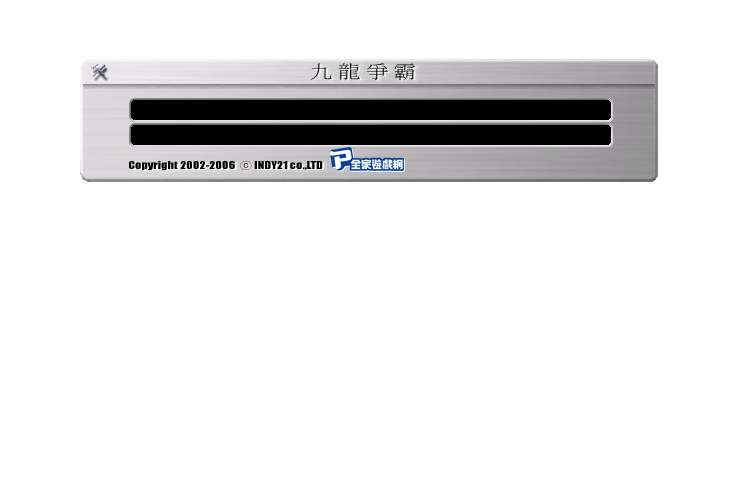
<style>
.page{position:relative;width:753px;height:483px;background:#ffffff}
.page>*{position:absolute;margin:0}
.t1{font:18px "PMingLiU";color:#000000;scale:1.23 1}
.t2{font:10px "Impact";color:#000000;scale:1.23 1}
.t3{font:10px "Gulim";color:#000000;scale:1.23 1}
</style>
<div class="page">
<p class="t1" style="left:310px;top:63px;width:106px;height:17px">九 龍 爭 霸</p>
<p class="t2" style="left:129px;top:161px;width:194px;height:10px">Copyright 2002-2006  <span class="t3">ⓒ</span> INDY21 co.,LTD</p>
</div>
